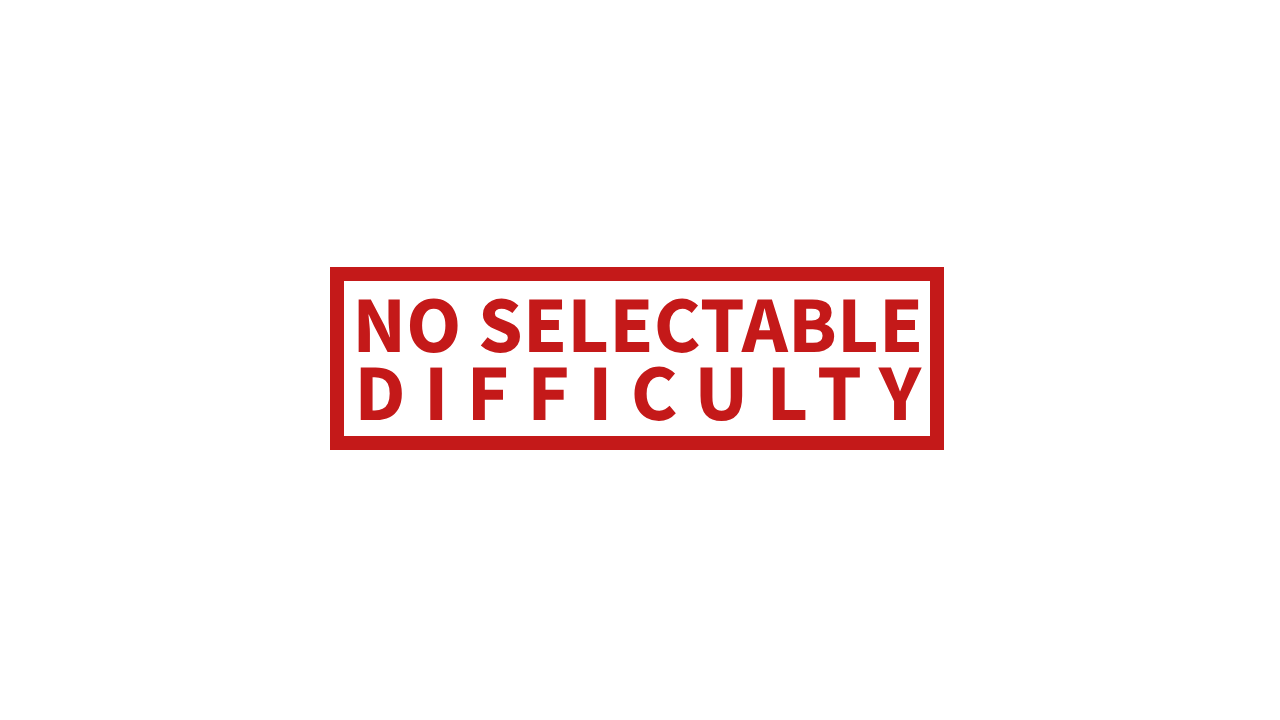
<style>
.page{position:relative;width:1280px;height:720px;background:#ffffff}
.page>*{position:absolute;margin:0}
.t1{font:80.4px/68px "SourceSansPro-Bold";letter-spacing:0.004em;color:#c41919;text-transform:uppercase}
.t2{font:80.4px/68px "SourceSansPro-Bold";letter-spacing:0.23em;color:#c41919;text-transform:uppercase}
</style>
<div class="page">
<p class="t1" style="left:358px;top:298px;width:564px;height:123px;text-align:center">No selectable<br><span class="t2">DIFFICULTY</span></p>
</div>
